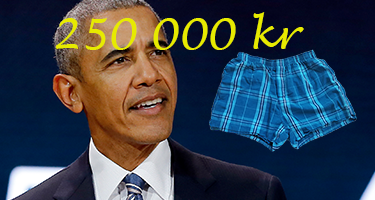
<style>
.page{position:relative;width:375px;height:200px}
.page>*{position:absolute;margin:0}
.t1{font:41.7px "LucidaHandwriting-Italic";color:#e7ea00}
</style>
<div class="page">
<p class="t1" style="left:55px;top:12px;width:249px;height:38px">250 000 kr</p>
</div>
